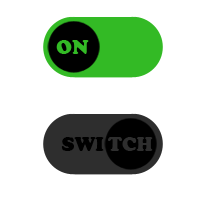
<style>
.page{position:relative;width:200px;height:200px;background:#ffffff}
.page>*{position:absolute;margin:0}
.t1{font:20px "CooperBlack";color:#33ba25}
.t2{font:20px "CooperBlack";color:#000000}
.t3{font:20px "CooperBlack";color:#2e2e2e}
</style>
<div class="page">
<p class="t1" style="left:56px;top:40px;width:33px;height:14px">ON</p>
<p class="t2" style="left:61px;top:137px;width:43px;height:14px">SWI</p>
<p class="t3" style="left:108px;top:137px;width:45px;height:14px">TCH</p>
</div>
